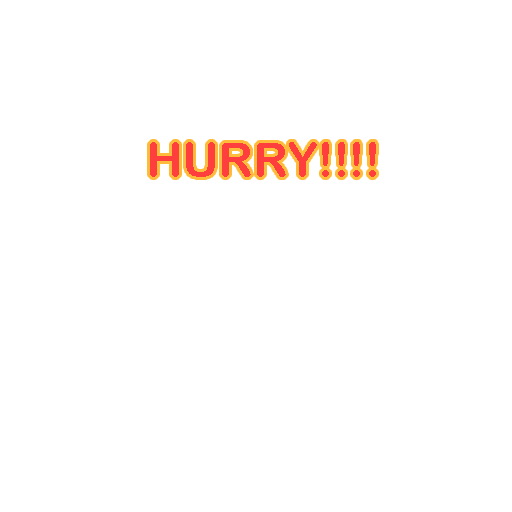
<style>
.page{position:relative;width:512px;height:512px;background:#ffffff}
.page>*{position:absolute;margin:0}
.t1{font:48px "ArialRoundedMTBold";color:#ff3e3e}
</style>
<div class="page">
<p class="t1" style="left:150px;top:142px;width:226px;height:35px">HURRY!!!!</p>
</div>
